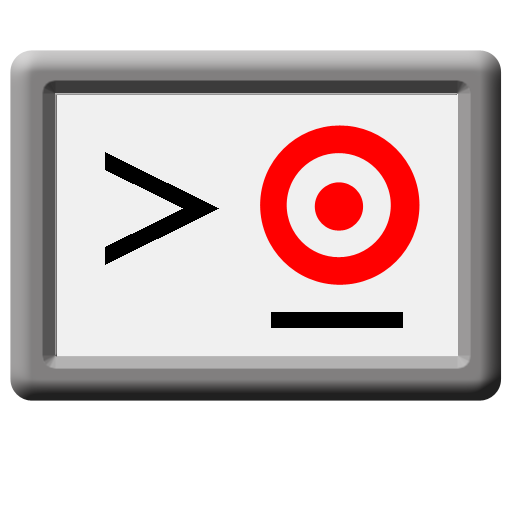
<style>
.page{position:relative;width:512px;height:512px;background:#ffffff}
.page>*{position:absolute;margin:0}
.t1{font:219.2px "LucidaConsole";color:#000000}
</style>
<div class="page">
<p class="t1" style="left:105px;top:152px;width:114px;height:113px">&gt;</p>
</div>
